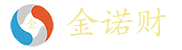
<style>
.page{position:relative;width:182px;height:50px;background:#ffffff}
.page>*{position:absolute;margin:0}
.t1{font:34.7px "STKaiti";color:#f0e68c}
.t2{font:40px "STKaiti";color:#f0e68c}
</style>
<div class="page">
<p class="t1" style="left:66px;top:7px;width:100px;height:30px">金诺财<span class="t2">财</span></p>
</div>
